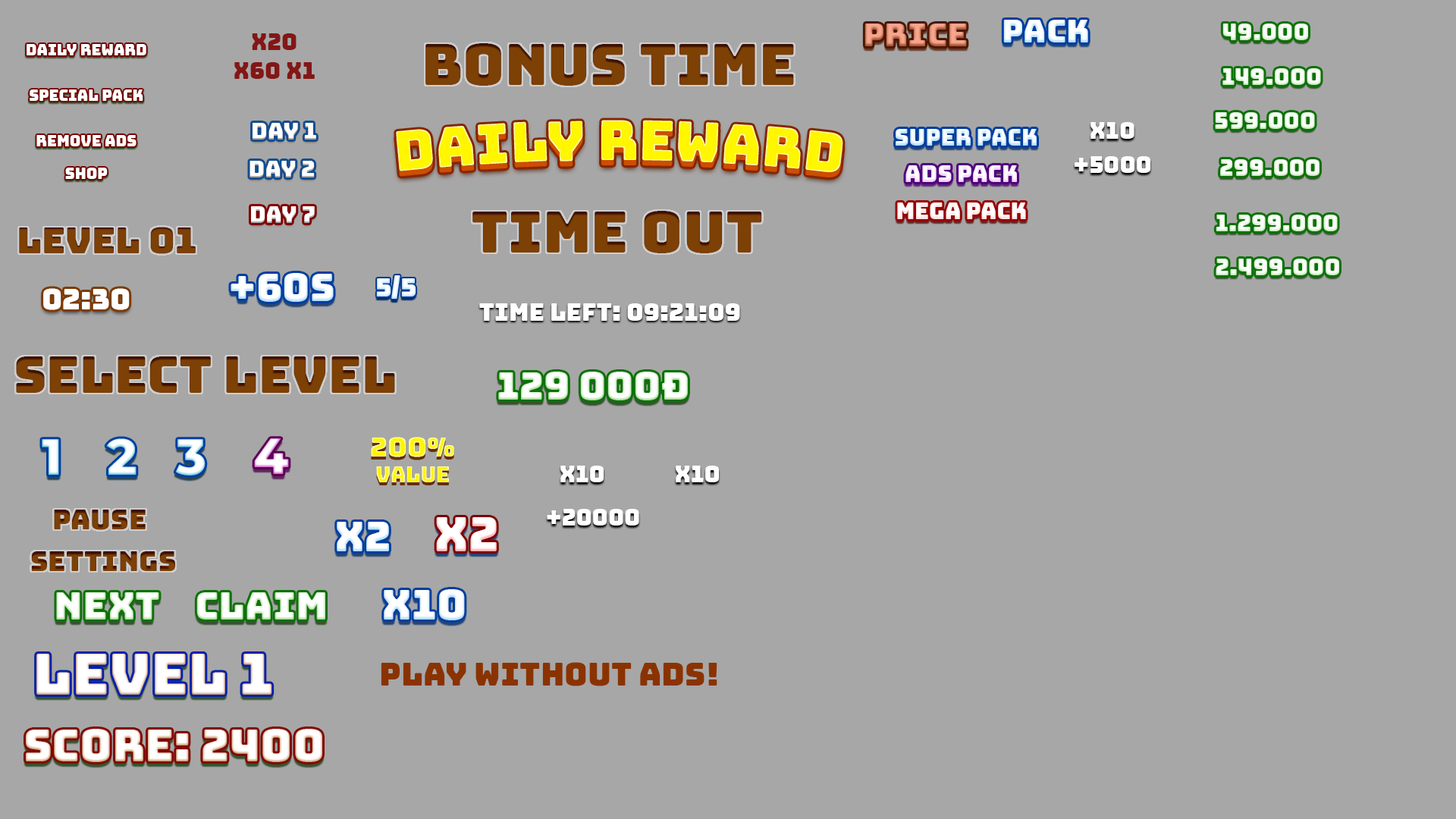
<style>
.page{position:relative;width:1456px;height:819px;background:#a7a7a7}
.page>*{position:absolute;margin:0}
.t1{font:31.6px "Bungee-Regular"}
.t2{font:31.6px "Bungee-Regular";color:#ffffff}
.t3{font:22.1px "Bungee-Regular";color:#ffffff}
.t4{font:22.1px "Bungee-Regular";color:#841616}
.t5{font:15px "Bungee-Regular";color:#ffffff}
.t6{font:56.9px "Bungee-Regular";color:#7d4005}
.t7{font:55.3px "Bungee-Regular";color:#fff600}
.t8{font:22.1px "Bungee-Regular"}
.t9{font:36.3px "Bungee-Regular";color:#7d4005}
.t10{font:37.9px "Bungee-Regular";color:#ffffff}
.t11{font:25.3px "Bungee-Regular";color:#ebf6ff}
.t12{font:28.4px "Bungee-Regular";color:#ffffff}
.t13{font:23.7px "Bungee-Regular";color:#ffffff}
.t14{font:50.6px "Bungee-Regular";color:#7d4005}
.t15{font:21.1px/25.6px "Bungee-Regular"}
.t16{font:27.1px/25.6px "Bungee-Regular"}
.t17{font:50.6px "Montserrat-ExtraBold";color:#ffffff}
.t18{font:27.3px "Bungee-Regular";color:#7d4005}
.t19{font:41.1px "Bungee-Regular";color:#ffffff}
.t20{font:47.4px "Bungee-Regular";color:#ffffff}
.t21{font:56.9px "Bungee-Regular";color:#ffffff}
.t22{font:31.6px "Bungee-Regular";color:#8a3300}
.t23{font:44.2px "Bungee-Regular";color:#ffffff}
</style>
<div class="page">
<p class="t1" style="left:864px;top:24px;width:103px;height:22px">PRICE</p>
<p class="t2" style="left:1003px;top:20px;width:85px;height:22px">PACK</p>
<p class="t3" style="left:1222px;top:24px;width:86px;height:16px">49.000</p>
<p class="t4" style="left:252px;top:33px;width:45px;height:17px">x20</p>
<p class="t5" style="left:27px;top:44px;width:119px;height:11px">DAILY REWARD</p>
<p class="t6" style="left:425px;top:43px;width:369px;height:43px">BONUS TIME</p>
<p class="t4" style="left:234px;top:62px;width:81px;height:17px">X60 X1</p>
<p class="t3" style="left:1222px;top:68px;width:99px;height:17px">149.000</p>
<p class="t5" style="left:30px;top:89px;width:113px;height:12px">SPECIAL PACK</p>
<p class="t3" style="left:1215px;top:112px;width:100px;height:17px">599.000</p>
<p class="t3" style="left:253px;top:123px;width:63px;height:17px">DAY 1</p>
<p class="t7" style="left:396px;top:120px;width:447px;height:52px">DAILY REWARD</p>
<p class="t3" style="left:1090px;top:122px;width:44px;height:17px">x10</p>
<p class="t5" style="left:36px;top:135px;width:100px;height:11px">REMOVE ADS</p>
<p class="t8" style="left:896px;top:129px;width:141px;height:17px">SUPER PACK</p>
<p class="t3" style="left:249px;top:161px;width:66px;height:16px">DAY 2</p>
<p class="t3" style="left:1075px;top:156px;width:75px;height:17px">+5000</p>
<p class="t3" style="left:1220px;top:159px;width:99px;height:17px">299.000</p>
<p class="t5" style="left:65px;top:168px;width:43px;height:11px">SHOP</p>
<p class="t3" style="left:905px;top:165px;width:112px;height:17px">ADS PACK</p>
<p class="t3" style="left:251px;top:206px;width:64px;height:17px">DAY 7</p>
<p class="t3" style="left:897px;top:202px;width:129px;height:17px">MEGA PACK</p>
<p class="t6" style="left:472px;top:211px;width:290px;height:42px">TIME OUT</p>
<p class="t3" style="left:1216px;top:215px;width:122px;height:16px">1.299.000</p>
<p class="t9" style="left:19px;top:227px;width:177px;height:27px">LEVEL 01</p>
<p class="t3" style="left:1216px;top:259px;width:123px;height:16px">2.499.000</p>
<p class="t10" style="left:231px;top:273px;width:103px;height:29px">+60s</p>
<p class="t11" style="left:376px;top:275px;width:40px;height:24px">5/5</p>
<p class="t12" style="left:43px;top:288px;width:87px;height:22px">02:30</p>
<p class="t13" style="left:479px;top:303px;width:261px;height:18px">Time left: 09:21:09</p>
<p class="t14" style="left:16px;top:356px;width:379px;height:37px">SELECT LEVEL</p>
<p class="t10" style="left:498px;top:372px;width:190px;height:28px">129 000đ</p>
<p class="t15" style="left:371px;top:437px;width:83px;height:45px;text-align:center"><span class="t16">200%<br></span>VALUE</p>
<p class="t17" style="left:42px;top:439px;width:17px;height:36px">1</p>
<p class="t17" style="left:106px;top:438px;width:30px;height:37px">2</p>
<p class="t17" style="left:175px;top:439px;width:31px;height:36px">3</p>
<p class="t17" style="left:254px;top:438px;width:35px;height:36px">4</p>
<p class="t3" style="left:560px;top:466px;width:44px;height:16px">x10</p>
<p class="t3" style="left:676px;top:466px;width:43px;height:16px">x10</p>
<p class="t18" style="left:54px;top:510px;width:92px;height:20px">PAUSE</p>
<p class="t3" style="left:547px;top:509px;width:92px;height:17px">+20000</p>
<p class="t19" style="left:337px;top:522px;width:52px;height:29px">x2</p>
<p class="t20" style="left:436px;top:517px;width:61px;height:34px">x2</p>
<p class="t18" style="left:31px;top:551px;width:144px;height:20px">SETTINGS</p>
<p class="t10" style="left:56px;top:592px;width:103px;height:28px">NEXT</p>
<p class="t10" style="left:196px;top:592px;width:129px;height:28px">CLAIM</p>
<p class="t19" style="left:384px;top:589px;width:81px;height:31px">x10</p>
<p class="t21" style="left:36px;top:654px;width:236px;height:41px">LEVEL 1</p>
<p class="t22" style="left:381px;top:662px;width:336px;height:24px">Play without ads!</p>
<p class="t23" style="left:26px;top:729px;width:296px;height:33px">SCORE: 2400</p>
</div>
